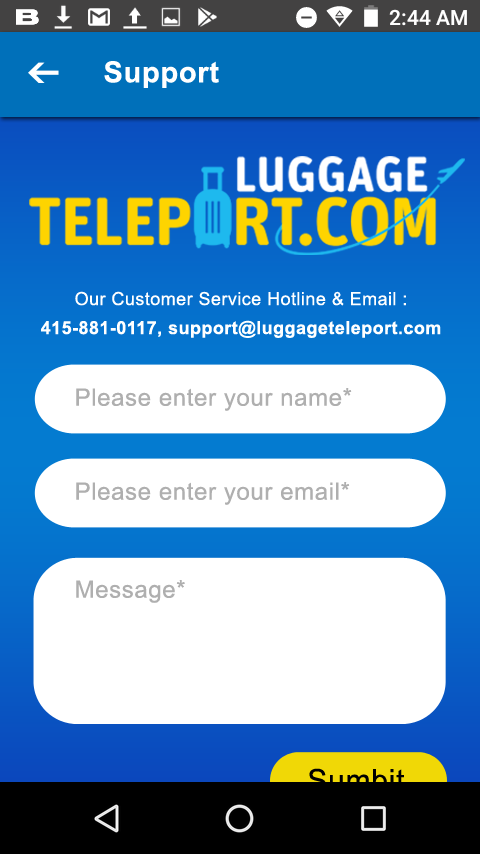
<style>
.page{position:relative;width:480px;height:854px;background:#ffffff}
.page>*{position:absolute;margin:0}
.t1{font:29px "Arial-BoldMT";letter-spacing:0.025em;color:#ffffff}
.t2{font:18px/29px "Arial-BoldMT";letter-spacing:0.025em;color:#ffffff}
.t3{font:18px/29px "ArialMT";letter-spacing:0.025em;color:#ffffff}
.t4{font:24px "ArialMT";letter-spacing:0.025em;color:#afafaf}
.t5{font:30px "ArialMT";letter-spacing:0.025em;color:#000000}
</style>
<div class="page">
<p class="t1" style="left:104px;top:61px;width:115px;height:27px">Support</p>
<p class="t2" style="left:41px;top:291px;width:400px;height:47px;text-align:center"><span class="t3">Our Customer Service Hotline &amp; Email :<br></span>415-881-0117, support@luggageteleport.com</p>
<p class="t4" style="left:76px;top:388px;width:276px;height:23px">Please enter your name*</p>
<p class="t4" style="left:76px;top:482px;width:274px;height:23px">Please enter your email*</p>
<p class="t4" style="left:76px;top:580px;width:109px;height:23px">Message*</p>
<p class="t5" style="left:308px;top:768px;width:97px;height:23px">Sumbit</p>
</div>
